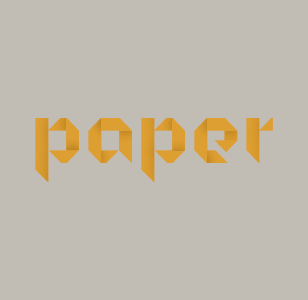
<style>
.page{position:relative;width:308px;height:300px;background:#c1bcb4}
.page>*{position:absolute;margin:0}
.t1{font:90px "Origram";letter-spacing:0.025em;color:#de9f32;scale:0.97 1}
</style>
<div class="page">
<p class="t1" style="left:35px;top:118px;width:238px;height:65px">PAPER</p>
</div>
